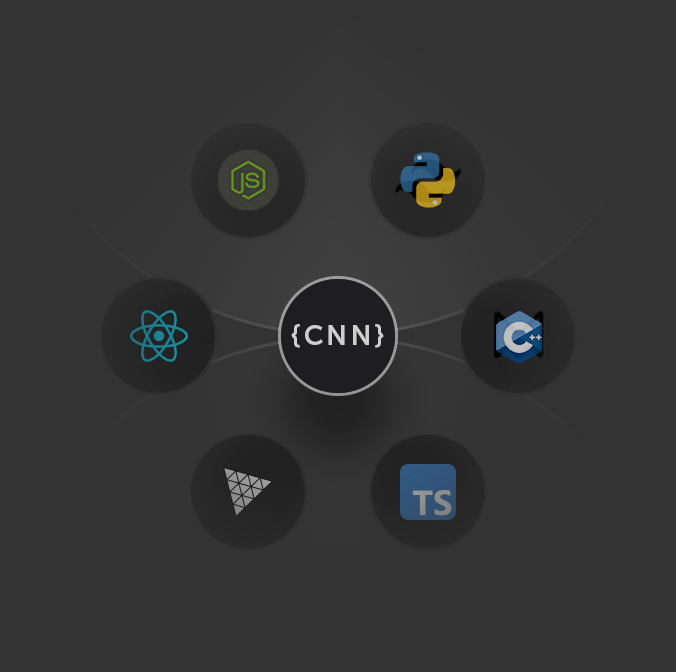
<style>
.page{position:relative;width:676px;height:672px;background:#333333}
.page>*{position:absolute;margin:0}
.t1{font:28px "MuseoSans-700";letter-spacing:0.1em;color:#cecece}
</style>
<div class="page">
<p class="t1" style="left:291px;top:324px;width:93px;height:24px">{CNN}</p>
</div>
